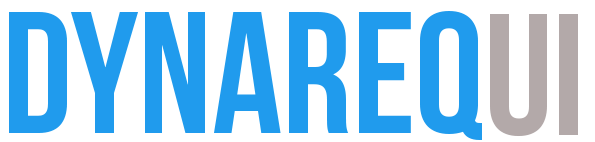
<style>
.page{position:relative;width:595px;height:142px;background:#ffffff}
.page>*{position:absolute;margin:0}
.t1{font:172.8px "BebasNeue";color:#209cee}
.t2{font:172.8px "BebasNeue";color:#b3a9a9}
</style>
<div class="page">
<p class="t1" style="left:9px;top:11px;width:473px;height:129px">Dynareq</p>
<p class="t2" style="left:490px;top:14px;width:88px;height:123px">UI</p>
</div>
